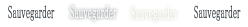
<style>
.page{position:relative;width:248px;height:27px;background:#ffffff}
.page>*{position:absolute;margin:0}
.t1{font:17.6px "MS-PMincho";color:#3e464a;font-weight:bold;scale:0.5 1}
</style>
<div class="page">
<p class="t1" style="left:8px;top:5px;width:47px;height:16px">Sauvegarder</p>
<p class="t1" style="left:194px;top:5px;width:47px;height:16px">Sauvegarder</p>
</div>
